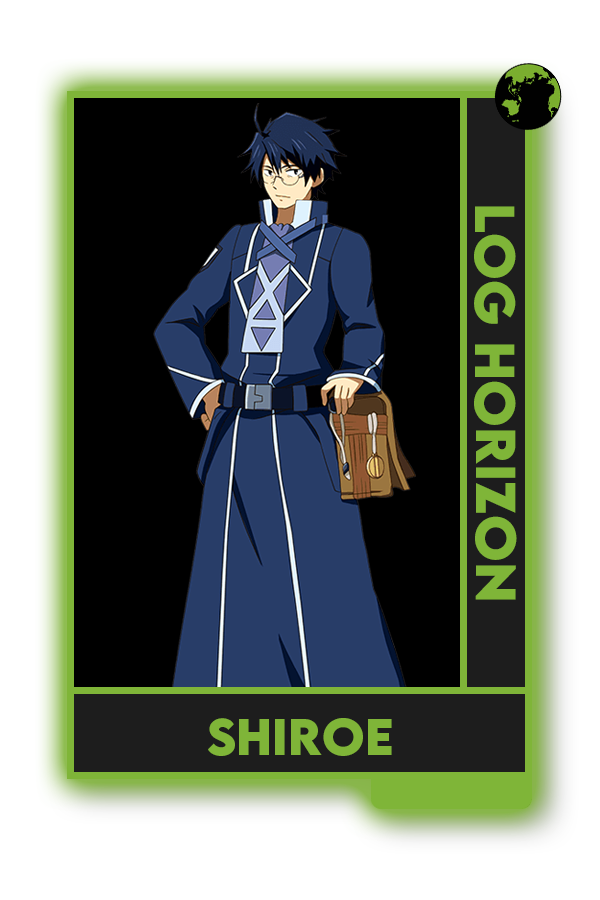
<style>
.page{position:relative;width:600px;height:900px;background:#000000}
.page>*{position:absolute;margin:0}
.t1{font:50px "LEMONMILK-Bold";color:#7fad41}
.t2{font:45.8px "LEMONMILK-Bold";color:#7fad41}
</style>
<div class="page">
<p class="t1" style="left:474px;top:206px;width:43px;height:394px;rotate:90deg">Log Horizon</p>
<p class="t2" style="left:208px;top:718px;width:184px;height:38px">Shiroe</p>
</div>
